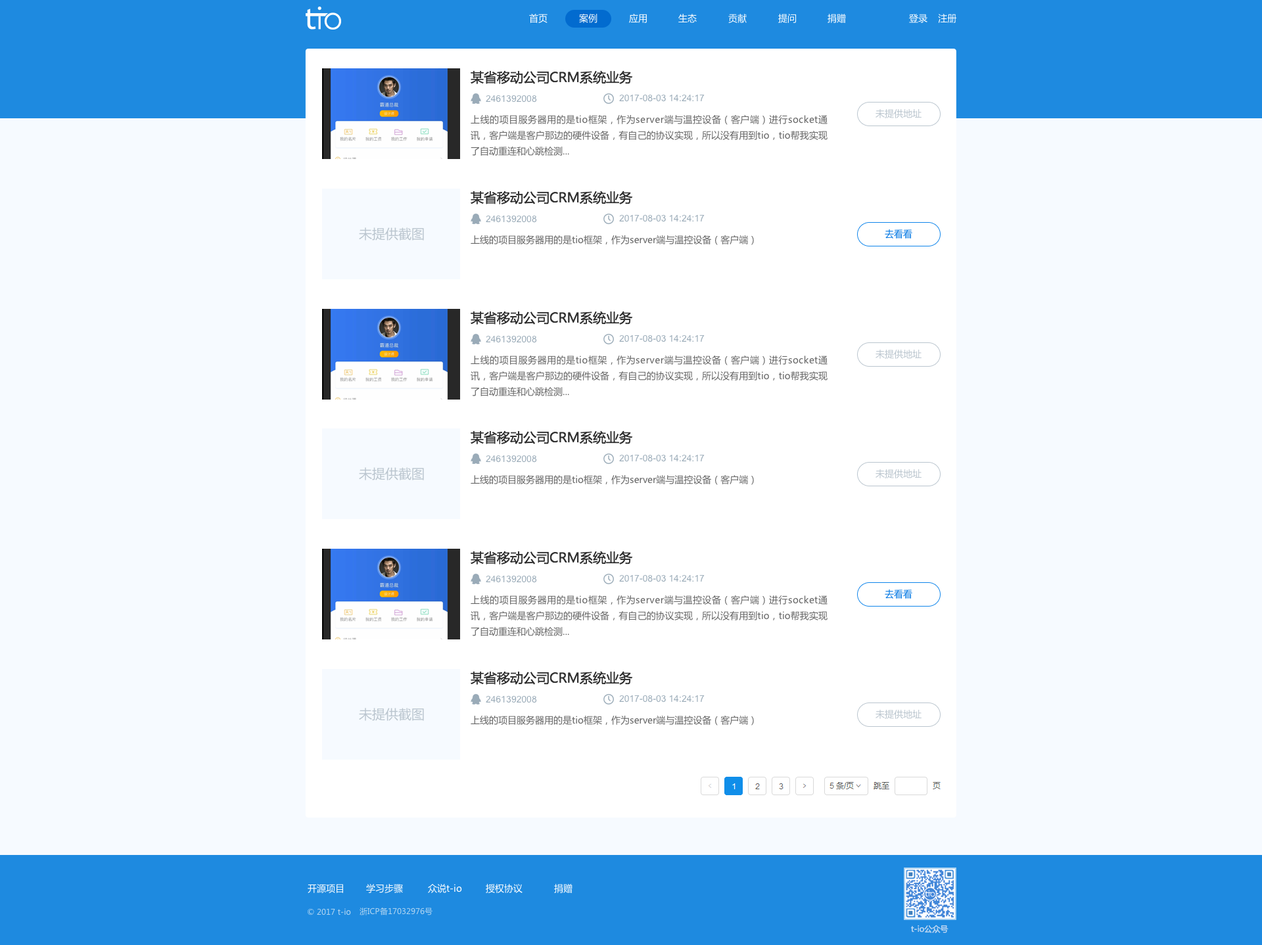
<style>
.page{position:relative;width:1262px;height:945px;background:#f6faff}
.page>*{position:absolute;margin:0}
.t1{font:9.2px "MicrosoftYaHei";color:#ffffff}
.t2{font:13.1px "MicrosoftYaHei";color:#333333}
.t3{font:9.2px "ArialMT";color:#9aabb8}
.t4{font:9.2px "MicrosoftYaHei";color:#bac5ce}
.t5{font:9.2px/15.8px "MicrosoftYaHei";color:#666666}
.t6{font:13.1px "MicrosoftYaHei";color:#bac5ce}
.t7{font:9.2px "MicrosoftYaHei";color:#0478e3}
.t8{font:9.2px "MicrosoftYaHei";color:#666666}
.t9{font:7.9px "MicrosoftYaHei";color:#b1d5f1}
.t10{font:7.9px "MicrosoftYaHei";color:#a7d0f0}
</style>
<div class="page">
<p class="t1" style="left:529px;top:14px;width:18px;height:9px">首页</p>
<p class="t1" style="left:579px;top:14px;width:18px;height:9px">案例</p>
<p class="t1" style="left:629px;top:14px;width:18px;height:9px">应用</p>
<p class="t1" style="left:678px;top:14px;width:19px;height:9px">生态</p>
<p class="t1" style="left:728px;top:14px;width:19px;height:9px">贡献</p>
<p class="t1" style="left:778px;top:14px;width:19px;height:9px">提问</p>
<p class="t1" style="left:827px;top:14px;width:19px;height:9px">捐赠</p>
<p class="t1" style="left:909px;top:14px;width:48px;height:9px">登录    注册</p>
<p class="t2" style="left:471px;top:70px;width:162px;height:14px">某省移动公司CRM系统业务</p>
<p class="t3" style="left:486px;top:95px;width:51px;height:8px">2461392008</p>
<p class="t3" style="left:619px;top:95px;width:86px;height:7px">2017-08-03 14:24:17</p>
<p class="t4" style="left:875px;top:109px;width:46px;height:9px">未提供地址</p>
<p class="t5" style="left:471px;top:115px;width:356px;height:41px;text-align:justify">上线的项目服务器用的是tio框架，作为server端与温控设备（客户端）进行socket通讯，客户端是客户那边的硬件设备，有自己的协议实现，所以没有用到tio，tio帮我实现了自动重连和心跳检测...</p>
<p class="t2" style="left:471px;top:191px;width:162px;height:13px">某省移动公司CRM系统业务</p>
<p class="t3" style="left:486px;top:215px;width:51px;height:8px">2461392008</p>
<p class="t3" style="left:619px;top:215px;width:86px;height:7px">2017-08-03 14:24:17</p>
<p class="t6" style="left:359px;top:227px;width:65px;height:14px">未提供截图</p>
<p class="t7" style="left:885px;top:229px;width:27px;height:10px">去看看</p>
<p class="t8" style="left:471px;top:235px;width:283px;height:10px">上线的项目服务器用的是tio框架，作为server端与温控设备（客户端）</p>
<p class="t2" style="left:471px;top:311px;width:162px;height:14px">某省移动公司CRM系统业务</p>
<p class="t3" style="left:486px;top:335px;width:51px;height:8px">2461392008</p>
<p class="t3" style="left:619px;top:335px;width:86px;height:7px">2017-08-03 14:24:17</p>
<p class="t4" style="left:875px;top:350px;width:46px;height:9px">未提供地址</p>
<p class="t5" style="left:471px;top:356px;width:356px;height:40px;text-align:justify">上线的项目服务器用的是tio框架，作为server端与温控设备（客户端）进行socket通讯，客户端是客户那边的硬件设备，有自己的协议实现，所以没有用到tio，tio帮我实现了自动重连和心跳检测...</p>
<p class="t2" style="left:471px;top:430px;width:162px;height:14px">某省移动公司CRM系统业务</p>
<p class="t3" style="left:486px;top:455px;width:51px;height:8px">2461392008</p>
<p class="t3" style="left:619px;top:455px;width:86px;height:7px">2017-08-03 14:24:17</p>
<p class="t6" style="left:359px;top:467px;width:65px;height:13px">未提供截图</p>
<p class="t4" style="left:875px;top:469px;width:46px;height:9px">未提供地址</p>
<p class="t8" style="left:471px;top:475px;width:283px;height:10px">上线的项目服务器用的是tio框架，作为server端与温控设备（客户端）</p>
<p class="t2" style="left:471px;top:551px;width:162px;height:14px">某省移动公司CRM系统业务</p>
<p class="t3" style="left:486px;top:575px;width:51px;height:8px">2461392008</p>
<p class="t3" style="left:619px;top:575px;width:86px;height:7px">2017-08-03 14:24:17</p>
<p class="t7" style="left:885px;top:589px;width:27px;height:10px">去看看</p>
<p class="t5" style="left:471px;top:595px;width:356px;height:41px;text-align:justify">上线的项目服务器用的是tio框架，作为server端与温控设备（客户端）进行socket通讯，客户端是客户那边的硬件设备，有自己的协议实现，所以没有用到tio，tio帮我实现了自动重连和心跳检测...</p>
<p class="t2" style="left:471px;top:671px;width:162px;height:14px">某省移动公司CRM系统业务</p>
<p class="t3" style="left:486px;top:695px;width:51px;height:8px">2461392008</p>
<p class="t3" style="left:619px;top:695px;width:86px;height:8px">2017-08-03 14:24:17</p>
<p class="t6" style="left:359px;top:708px;width:65px;height:13px">未提供截图</p>
<p class="t4" style="left:875px;top:710px;width:46px;height:9px">未提供地址</p>
<p class="t8" style="left:471px;top:716px;width:283px;height:10px">上线的项目服务器用的是tio框架，作为server端与温控设备（客户端）</p>
<p class="t1" style="left:308px;top:884px;width:35px;height:9px">开源项目</p>
<p class="t1" style="left:366px;top:884px;width:37px;height:9px">学习步骤</p>
<p class="t1" style="left:428px;top:884px;width:34px;height:9px">众说t-io</p>
<p class="t1" style="left:486px;top:884px;width:36px;height:9px">授权协议</p>
<p class="t1" style="left:554px;top:884px;width:18px;height:9px">捐赠</p>
<p class="t9" style="left:308px;top:908px;width:43px;height:7px">© 2017 t-io</p>
<p class="t9" style="left:359px;top:908px;width:73px;height:7px">浙ICP备17032976号</p>
<p class="t10" style="left:911px;top:925px;width:37px;height:8px">t-io公众号</p>
</div>
